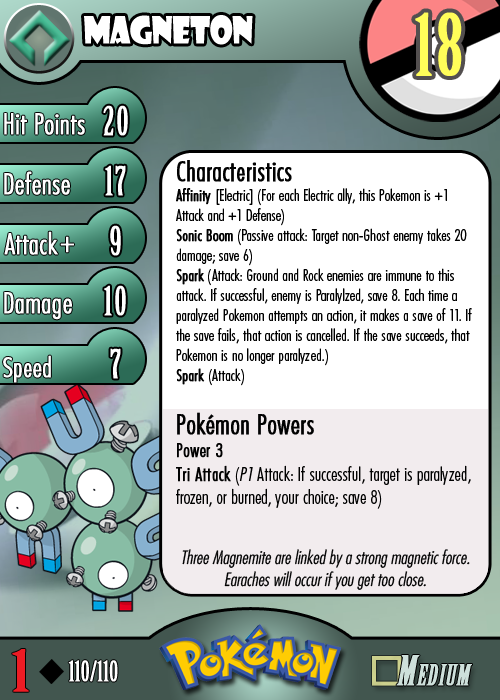
<style>
.page{position:relative;width:500px;height:700px;background:#ffffff}
.page>*{position:absolute;margin:0}
.t1{font:36.7px "ShowcardGothic-Reg";letter-spacing:-0.025em;color:#ffffff;scale:0.91 1}
.t2{font:83.3px "BirchStd";letter-spacing:0.025em;color:#fffd59;font-weight:bold}
.t3{font:27.8px "Futura-CondensedLight";color:#ffffff;font-weight:bold}
.t4{font:38.9px "BirchStd";letter-spacing:0.035em;color:#ffffff;font-weight:bold}
.t5{font:16.7px "FuturaCondensedBQ-Light";color:#010101}
.t6{font:27.8px "FuturaCondensedBQ-Light";color:#010101;font-weight:bold}
.t7{font:16.7px "FuturaCondensedBQ-Light";color:#010101;font-weight:bold}
.t8{font:19.4px "FuturaCondensedBQ-Light";color:#010101;font-weight:bold}
.t9{font:19.4px "FuturaCondensedBQ-Light";color:#010101}
.t10{font:19.4px "FuturaCondensedBQ-Light";color:#010101;font-style:italic}
.t11{font:30.6px "Futura-CondensedLight";color:#ffffff;font-weight:bold}
.t12{font:27.8px "FuturaCondensedBQ-Light";color:#ffffff;font-weight:bold}
.t13{font:18.1px "Futura-CondensedLight";color:#010101;font-style:italic}
.t14{font:55.6px "BirchStd";color:#ed1c24;font-weight:bold;scale:1.5 1}
.t15{font:27.8px "BirchStd";color:#ffffff;font-weight:bold}
</style>
<div class="page">
<p class="t1" style="left:84px;top:15px;width:169px;height:30px">magneton</p>
<p class="t2" style="left:415px;top:12px;width:47px;height:64px">18</p>
<p class="t3" style="left:4px;top:113px;width:81px;height:22px">Hit Points</p>
<p class="t4" style="left:103px;top:105px;width:25px;height:31px">20</p>
<p class="t5" style="left:176px;top:160px;width:296px;height:349px"><span class="t6">Characteristics<br></span><span class="t7">Affinity </span>[Electric] (For each Electric ally, this Pokemon is +1 Attack and +1 Defense)<br><span class="t7">Sonic Boom</span> (Passive attack: Target non-Ghost enemy takes 20 damage; save 6)<br><span class="t7">Spark</span> (Attack: Ground and Rock enemies are immune to this attack. If successful, enemy is Paralylzed, save 8. Each time a paralyzed Pokemon attempts an action, it makes a save of 11. If the save fails, that action is cancelled. If the save succeeds, that Pokemon is no longer paralyzed.)<br><span class="t7">Spark </span>(Attack)<br><br><span class="t6">Pokémon Powers<br></span><span class="t8">Power 3<br>Tri Attack</span><span class="t9"> (</span><span class="t10">P1</span><span class="t9"> Attack: If successful, target is paralyzed, frozen, or burned, your choice; save 8)</span></p>
<p class="t3" style="left:4px;top:171px;width:66px;height:24px">Defense</p>
<p class="t4" style="left:105px;top:165px;width:21px;height:31px">17</p>
<p class="t3" style="left:4px;top:231px;width:54px;height:24px">Attack</p>
<p class="t4" style="left:110px;top:225px;width:11px;height:31px">9</p>
<p class="t11" style="left:60px;top:236px;width:14px;height:17px">+</p>
<p class="t3" style="left:4px;top:292px;width:68px;height:28px">Damage</p>
<p class="t4" style="left:104px;top:285px;width:22px;height:31px">10</p>
<p class="t4" style="left:110px;top:348px;width:11px;height:31px">7</p>
<p class="t12" style="left:3px;top:355px;width:48px;height:28px">Speed</p>
<p class="t13" style="left:182px;top:549px;width:288px;height:41px;text-align:center">Three Magnemite are linked by a strong magnetic force. Earaches will occur if you get too close.</p>
<p class="t14" style="left:12px;top:649px;width:17px;height:43px">1</p>
<p class="t15" style="left:68px;top:660px;width:50px;height:22px">110/110</p>
</div>
